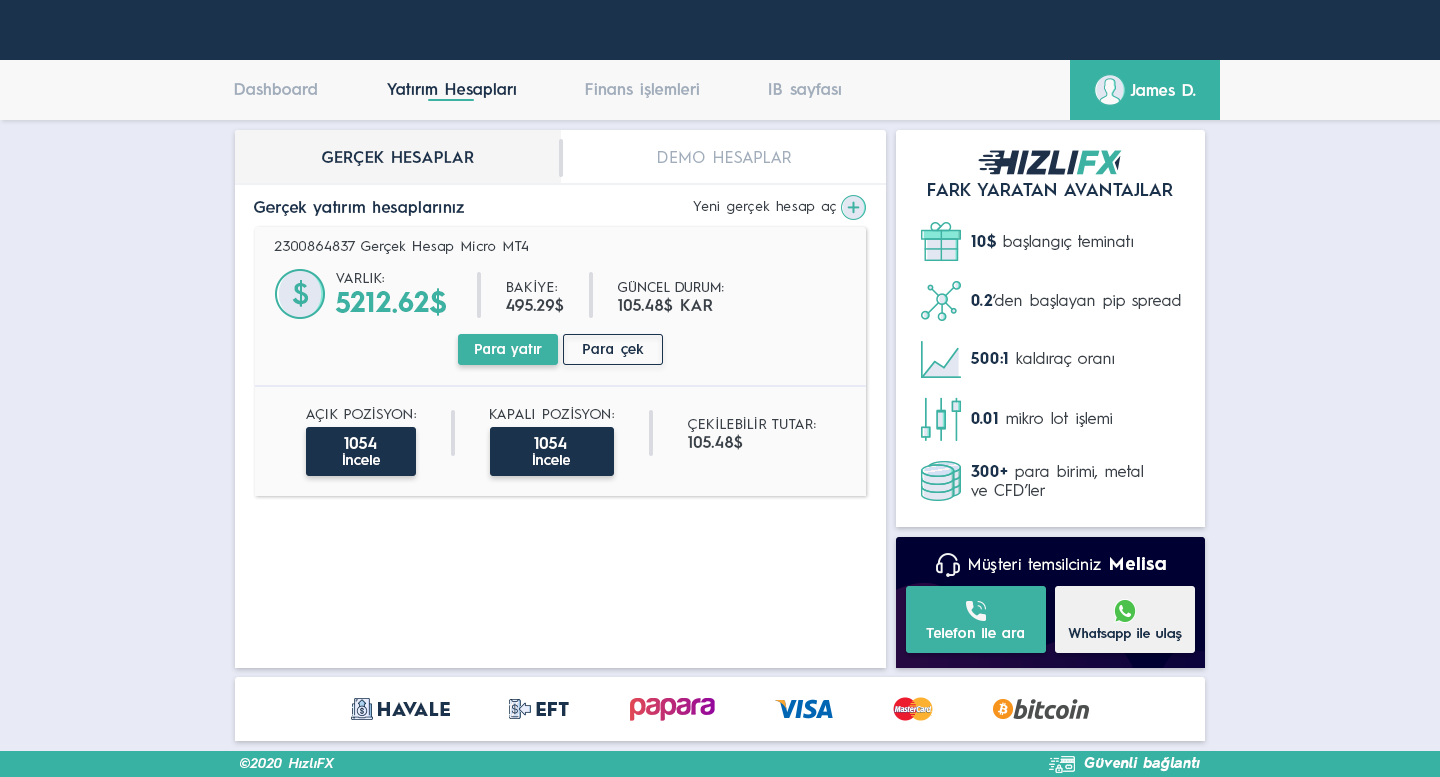
<style>
.page{position:relative;width:1440px;height:777px;background:#ffffff}
.page>*{position:absolute;margin:0}
.t1{font:16px "HurmeGeometricSans3-SemiBold";color:#a1adbb}
.t2{font:16px "HurmeGeometricSans3-SemiBold";color:#1a324c}
.t3{font:16px "HurmeGeometricSans3-SemiBold";color:#fefefe}
.t4{font:16px "HurmeGeometricSans1-SemiBold";letter-spacing:0.01em;color:#1a324c}
.t5{font:16px "HurmeGeometricSans1-Regular";letter-spacing:0.01em;color:#a1adbb}
.t6{font:18px "HurmeGeometricSans1-SemiBold";color:#1a324c}
.t7{font:16px "HurmeGeometricSans3-SemiBold";letter-spacing:0.01em;color:#1a324c}
.t8{font:14px "HurmeGeometricSans1-Regular";letter-spacing:0.025em;color:#3a4149}
.t9{font:16px "HurmeGeometricSans1-Regular";color:#3a4149}
.t10{font:16px "HurmeGeometricSans1-Bold";color:#1a324c}
.t11{font:29.2px "HurmeGeometricSans2-SemiBold";letter-spacing:0.01em;color:#3db2a3}
.t12{font:14px "HurmeGeometricSans1-Regular";letter-spacing:0.01em;color:#3a4149}
.t13{font:16px "HurmeGeometricSans1-SemiBold";letter-spacing:0.01em;color:#3a4149}
.t14{font:13px "HurmeGeometricSans1-Regular";letter-spacing:0.01em;color:#3a4149}
.t15{font:28px "HurmeGeometricSans1-Bold";letter-spacing:0.01em;color:#3db2a3}
.t16{font:14px "HurmeGeometricSans3-SemiBold";letter-spacing:0.01em;color:#ffffff}
.t17{font:14px "HurmeGeometricSans3-SemiBold";letter-spacing:0.025em;color:#1a324c}
.t18{font:16px "HurmeGeometricSans1-SemiBold";letter-spacing:0.01em;color:#ffffff}
.t19{font:16px "HurmeGeometricSans1-Regular";letter-spacing:0.025em;color:#ffffff}
.t20{font:18px "HurmeGeometricSans1-Bold";letter-spacing:0.05em;color:#ffffff}
.t21{font:13.5px "HurmeGeometricSans3-SemiBold";letter-spacing:0.01em;color:#1a324c}
.t22{font:18px "HurmeGeometricSans1-Black";letter-spacing:0.025em;color:#1a324c}
.t23{font:14px "HurmeGeometricSans2-SemiBoldObl";letter-spacing:0.025em;color:#ffffff}
.t24{font:14px "HurmeGeometricSans2-BoldObl";letter-spacing:0.025em;color:#ffffff}
</style>
<div class="page">
<p class="t1" style="left:234px;top:83px;width:83px;height:12px">Dashboard</p>
<p class="t2" style="left:387px;top:83px;width:129px;height:15px">Yatırım Hesapları</p>
<p class="t1" style="left:585px;top:83px;width:114px;height:15px">Finans işlemleri</p>
<p class="t1" style="left:769px;top:83px;width:72px;height:15px">IB sayfası</p>
<p class="t3" style="left:1130px;top:84px;width:66px;height:12px">James D.</p>
<p class="t4" style="left:322px;top:151px;width:152px;height:15px">GERÇEK HESAPLAR</p>
<p class="t5" style="left:658px;top:151px;width:133px;height:12px">DEMO HESAPLAR</p>
<p class="t6" style="left:928px;top:183px;width:245px;height:13px">FARK YARATAN AVANTAJLAR</p>
<p class="t7" style="left:254px;top:201px;width:210px;height:15px">Gerçek yatırım hesaplarınız</p>
<p class="t8" style="left:693px;top:201px;width:143px;height:13px">Yeni gerçek hesap aç</p>
<p class="t9" style="left:971px;top:233px;width:162px;height:17px"><span class="t10">10$</span> başlangıç teminatı</p>
<p class="t8" style="left:274px;top:241px;width:254px;height:13px">2300864837 Gerçek Hesap Micro MT4</p>
<p class="t11" style="left:292px;top:280px;width:17px;height:27px">$</p>
<p class="t12" style="left:336px;top:273px;width:48px;height:10px">VARLIK:</p>
<p class="t12" style="left:506px;top:280px;width:58px;height:33px">BAKİYE:<br><span class="t13">495.29$</span></p>
<p class="t14" style="left:618px;top:281px;width:106px;height:32px">GÜNCEL DURUM:<br><span class="t13">105.48$ KAR</span></p>
<p class="t15" style="left:335px;top:288px;width:111px;height:28px">5212.62$</p>
<p class="t9" style="left:971px;top:294px;width:210px;height:15px"><span class="t10">0.2</span>‘den başlayan pip spread</p>
<p class="t16" style="left:475px;top:344px;width:67px;height:13px">Para yatır</p>
<p class="t17" style="left:583px;top:344px;width:61px;height:13px">Para çek</p>
<p class="t9" style="left:970px;top:352px;width:144px;height:15px"><span class="t10">500:1</span> kaldıraç oranı</p>
<p class="t12" style="left:306px;top:407px;width:110px;height:15px">AÇIK POZİSYON:</p>
<p class="t12" style="left:490px;top:407px;width:124px;height:12px">KAPALI POZİSYON:</p>
<p class="t9" style="left:971px;top:412px;width:141px;height:15px"><span class="t10">0.01</span> mikro lot işlemi</p>
<p class="t12" style="left:688px;top:417px;width:128px;height:33px">ÇEKİLEBİLİR TUTAR:<br><span class="t13">105.48$</span></p>
<p class="t16" style="left:343px;top:437px;width:37px;height:28px;text-align:center"><span class="t18">1054<br></span>İncele</p>
<p class="t16" style="left:533px;top:437px;width:37px;height:28px;text-align:center"><span class="t18">1054<br></span>İncele</p>
<p class="t9" style="left:971px;top:465px;width:172px;height:32px"><span class="t10">300+</span> para birimi, metal<br>ve CFD’ler</p>
<p class="t19" style="left:969px;top:557px;width:197px;height:16px">Müşteri temsilciniz <span class="t20">Melisa</span></p>
<p class="t16" style="left:926px;top:628px;width:98px;height:10px">Telefon ile ara</p>
<p class="t21" style="left:1068px;top:628px;width:114px;height:13px">Whatsapp ile ulaş</p>
<p class="t22" style="left:378px;top:702px;width:72px;height:14px">HAVALE</p>
<p class="t22" style="left:536px;top:702px;width:33px;height:14px">EFT</p>
<p class="t23" style="left:240px;top:758px;width:95px;height:10px">©2020 HızlıFX</p>
<p class="t24" style="left:1084px;top:757px;width:116px;height:15px">Güvenli bağlantı</p>
</div>
